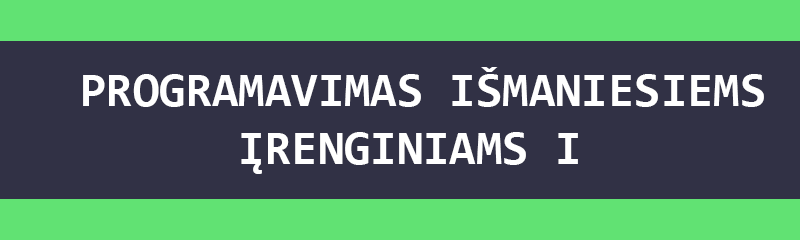
<style>
.page{position:relative;width:800px;height:240px;background:#313145}
.page>*{position:absolute;margin:0}
.t1{font:48px "Consolas-Bold";color:#ffffff}
</style>
<div class="page">
<p class="t1" style="left:83px;top:67px;width:681px;height:107px">PROGRAMAVIMAS IŠMANIESIEMS<br>      ĮRENGINIAMS I</p>
</div>
